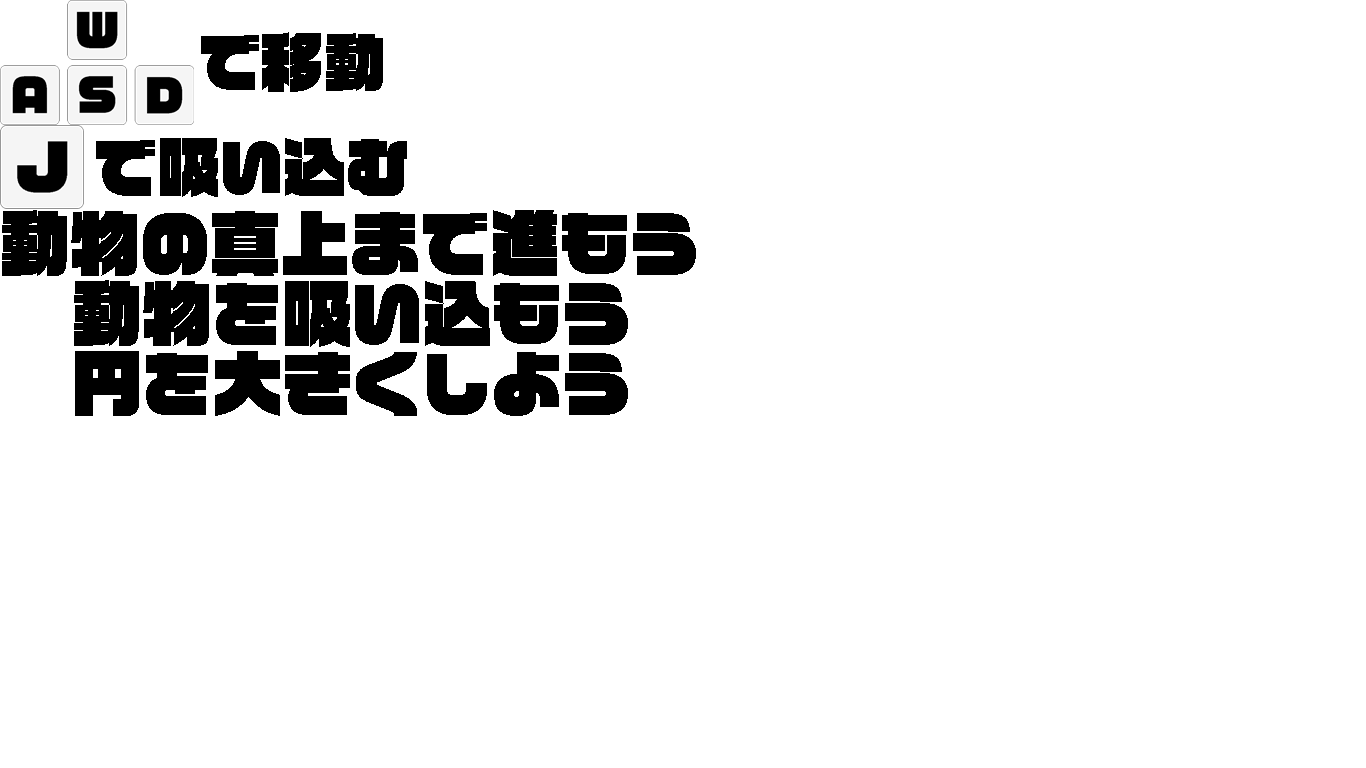
<style>
.page{position:relative;width:1366px;height:768px;background:#ffffff}
.page>*{position:absolute;margin:0}
.t1{font:70px "VDL-LogoJrBlack-Black";color:#000000}
</style>
<div class="page">
<p class="t1" style="left:2px;top:210px;width:694px;height:66px">動物の真上まで進もう</p>
<p class="t1" style="left:74px;top:280px;width:554px;height:67px">動物を吸い込もう</p>
<p class="t1" style="left:75px;top:351px;width:553px;height:65px">円を大きくしよう</p>
</div>
